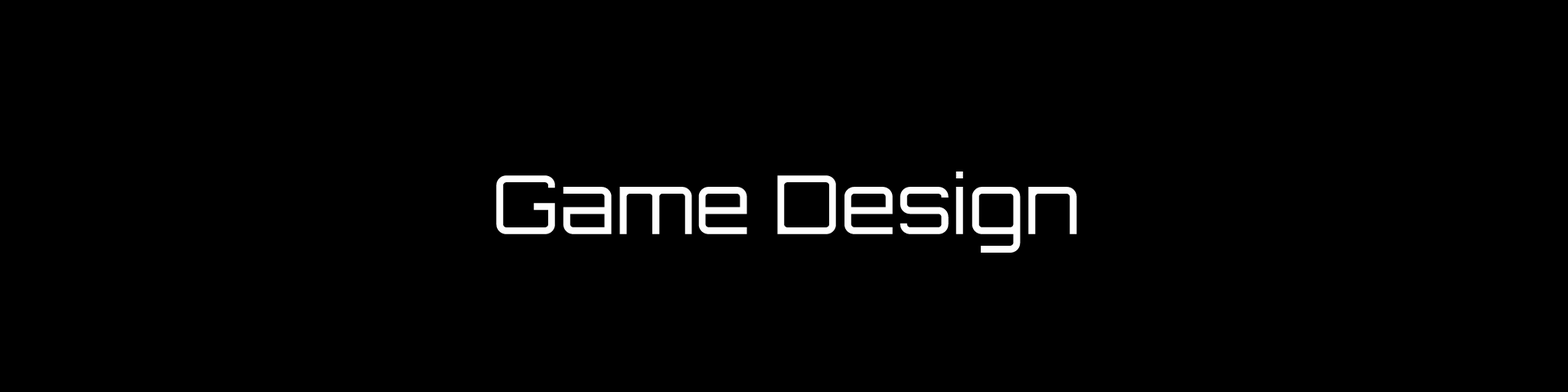
<style>
.page{position:relative;width:1568px;height:392px;background:#000000}
.page>*{position:absolute;margin:0}
.t1{font:81px "Orbitron-Light";color:#fefefe}
.t2{font:48.6px "AgencyFB-Reg";color:#fefefe}
</style>
<div class="page">
<p class="t1" style="left:496px;top:172px;width:581px;height:81px"><span class="t2"><br><br></span>Game Design</p>
</div>
